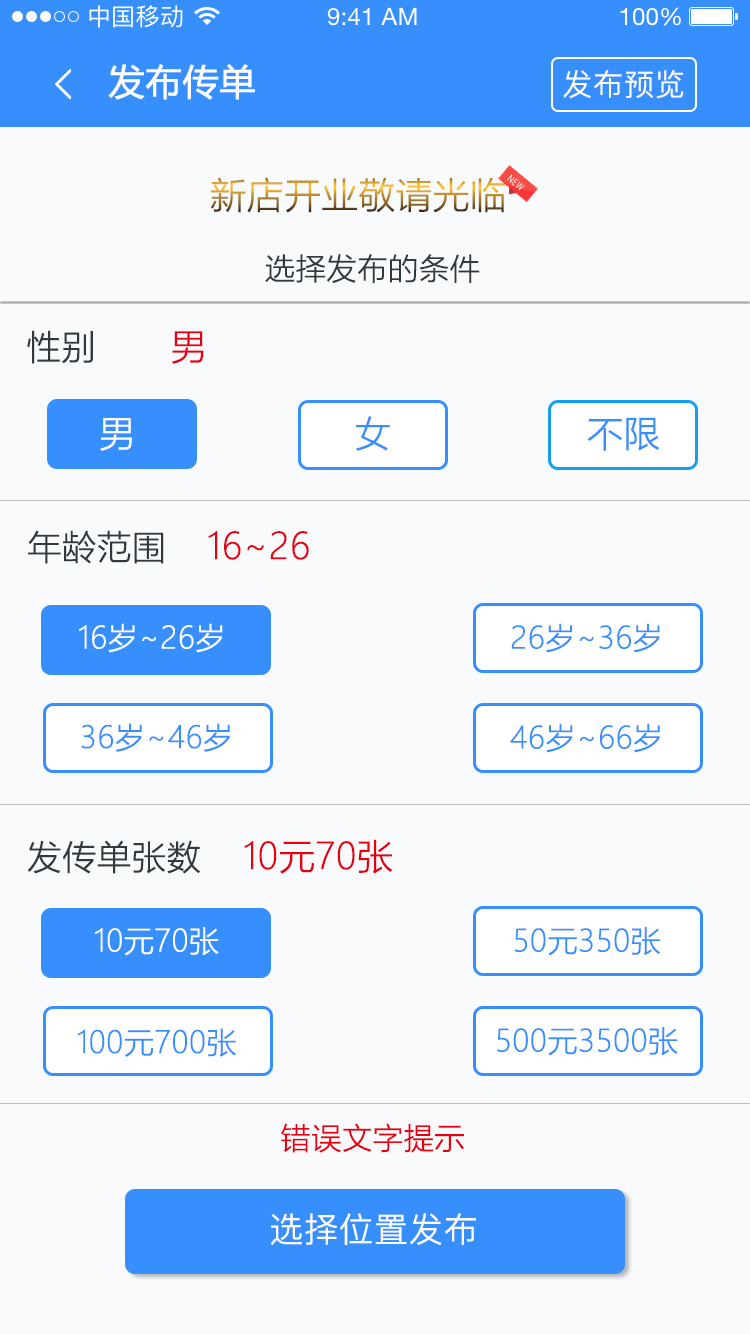
<style>
.page{position:relative;width:750px;height:1334px;background:#f9fafc}
.page>*{position:absolute;margin:0}
.t1{font:36px "MicrosoftYaHei";color:#ffffff;font-weight:bold}
.t2{font:30px "PingFang-SC-Regular";color:#ffffff;font-weight:bold}
.t3{font:35.9px "MicrosoftYaHeiLight";font-weight:bold}
.t4{font:30px "MicrosoftYaHeiLight";color:#303a3e;font-weight:bold}
.t5{font:34px "MicrosoftYaHeiLight";color:#303a3e;font-weight:bold}
.t6{font:36px "MicrosoftYaHeiLight";color:#e60012;font-weight:bold}
.t7{font:36px "MicrosoftYaHeiLight";color:#ffffff;font-weight:bold}
.t8{font:36px "MicrosoftYaHeiLight";color:#378ffe;font-weight:bold}
.t9{font:30px "MicrosoftYaHeiLight";color:#ffffff;font-weight:bold}
.t10{font:30px "MicrosoftYaHeiLight";color:#378ffe;font-weight:bold}
.t11{font:30px "MicrosoftYaHeiLight";color:#e60012;font-weight:bold}
.t12{font:34px "PingFang-SC-Regular";color:#ffffff;font-weight:bold}
</style>
<div class="page">
<p class="t1" style="left:108px;top:64px;width:147px;height:36px">发布传单</p>
<p class="t2" style="left:563px;top:70px;width:121px;height:29px">发布预览</p>
<p class="t3" style="left:210px;top:177px;width:296px;height:36px">新店开业敬请光临</p>
<p class="t4" style="left:265px;top:254px;width:215px;height:29px">选择发布的条件</p>
<p class="t5" style="left:27px;top:330px;width:177px;height:34px">性别   <span class="t6">男</span></p>
<p class="t7" style="left:100px;top:418px;width:32px;height:33px">男</p>
<p class="t8" style="left:356px;top:416px;width:34px;height:35px">女</p>
<p class="t8" style="left:587px;top:417px;width:73px;height:34px">不限</p>
<p class="t6" style="left:28px;top:530px;width:281px;height:34px"><span class="t5">年龄范围  </span>16~26</p>
<p class="t9" style="left:79px;top:623px;width:144px;height:30px">16岁~26岁</p>
<p class="t10" style="left:511px;top:623px;width:149px;height:30px">26岁~36岁</p>
<p class="t10" style="left:81px;top:723px;width:149px;height:29px">36岁~46岁</p>
<p class="t10" style="left:510px;top:723px;width:150px;height:30px">46岁~66岁</p>
<p class="t6" style="left:27px;top:839px;width:366px;height:35px"><span class="t5">发传单张数  </span>10元70张</p>
<p class="t9" style="left:95px;top:927px;width:124px;height:29px">10元70张</p>
<p class="t10" style="left:515px;top:927px;width:145px;height:29px">50元350张</p>
<p class="t10" style="left:77px;top:1028px;width:159px;height:29px">100元700张</p>
<p class="t10" style="left:497px;top:1027px;width:181px;height:29px">500元3500张</p>
<p class="t11" style="left:281px;top:1123px;width:183px;height:30px">错误文字提示</p>
<p class="t12" style="left:271px;top:1213px;width:205px;height:32px">选择位置发布</p>
</div>
